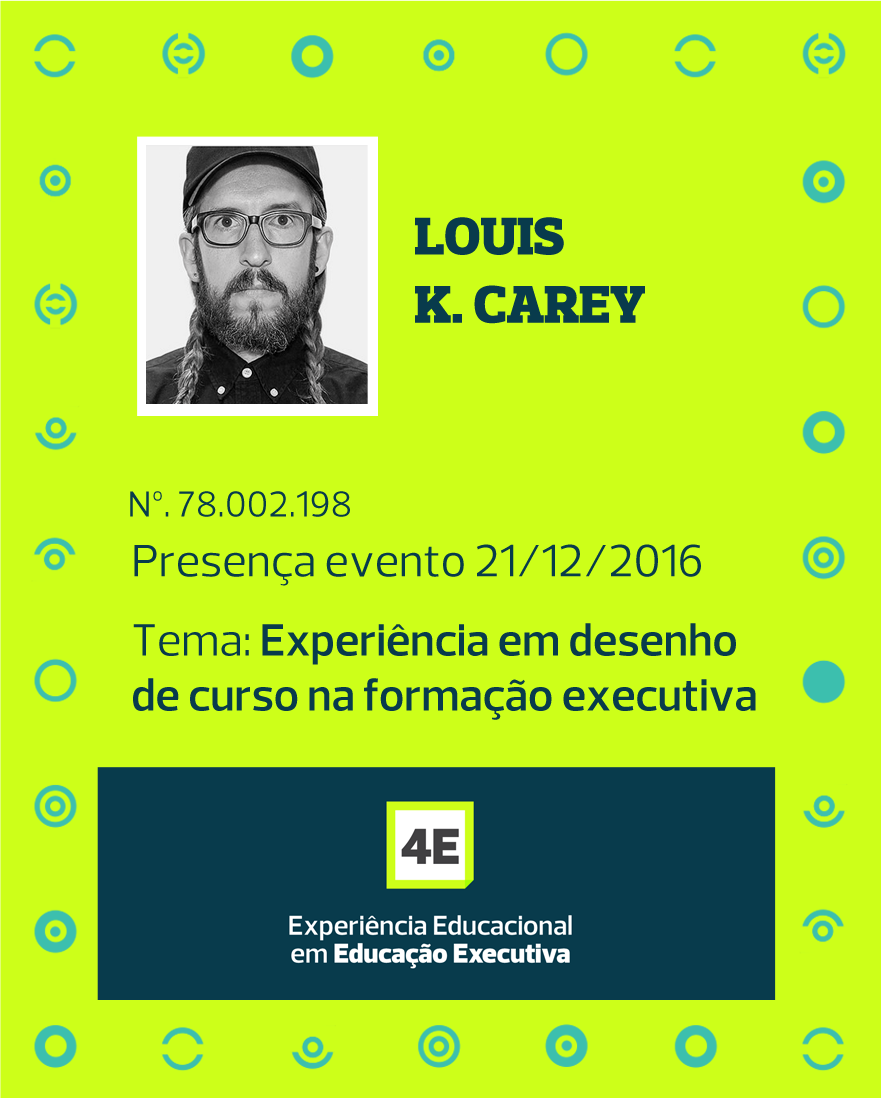
<style>
.page{position:relative;width:881px;height:1098px;background:#cdff19}
.page>*{position:absolute;margin:0}
.t1{font:54px/68.1px "PreloSlab-Black";color:#083b4c;text-transform:uppercase}
.t2{font:37px "Prelo-Book";color:#083b4c}
.t3{font:46px "Prelo-SemiBold";color:#083b4c}
.t4{font:46px "Prelo-Book";color:#083b4c}
</style>
<div class="page">
<p class="t1" style="left:415px;top:217px;width:230px;height:107px">louis<br>K. Carey</p>
<p class="t2" style="left:130px;top:491px;width:220px;height:26px">Nº. 78.002.198</p>
<p class="t3" style="left:133px;top:544px;width:623px;height:176px"><span class="t4">Presença evento 21/12/2016<br>Tema: </span>Experiência em desenho<br>de curso na formação executiva</p>
</div>
